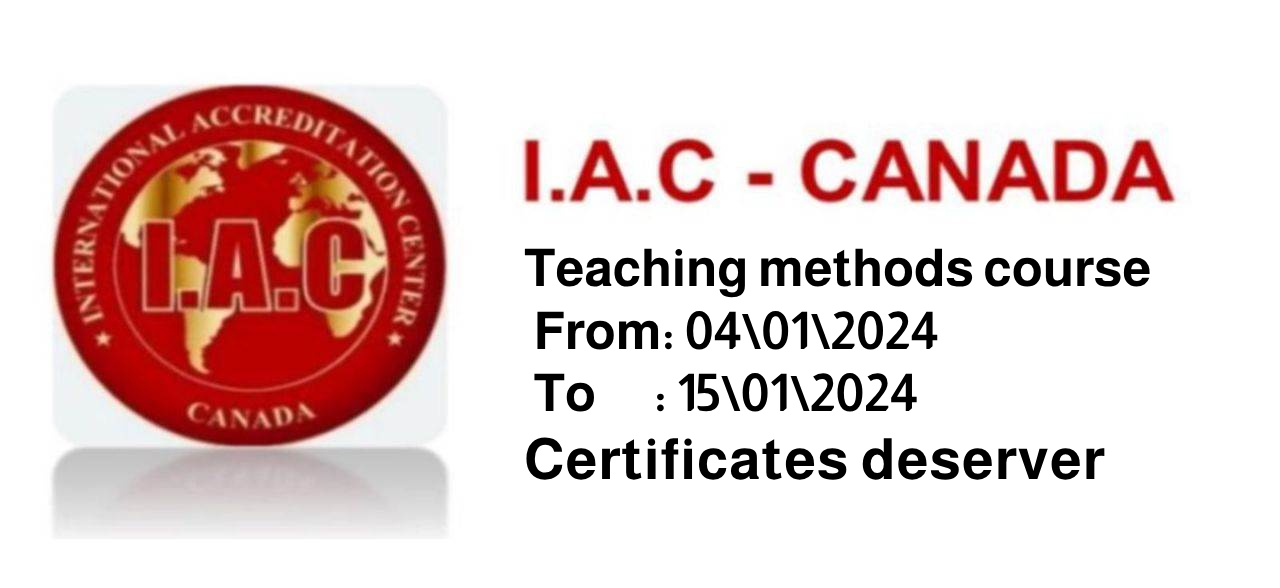
<style>
.page{position:relative;width:1280px;height:588px;background:#ffffff}
.page>*{position:absolute;margin:0}
.t1{font:52px "Almarai-Bold";color:#000000}
.t2{font:57px "Almarai-Bold";letter-spacing:0.02em;color:#000000}
</style>
<div class="page">
<p class="t1" style="left:524px;top:248px;width:626px;height:232px">Teaching methods course<br> From: 04\01\2024<br> To      : 15\01\2024<br><span class="t2">Certificates deserver</span></p>
</div>
